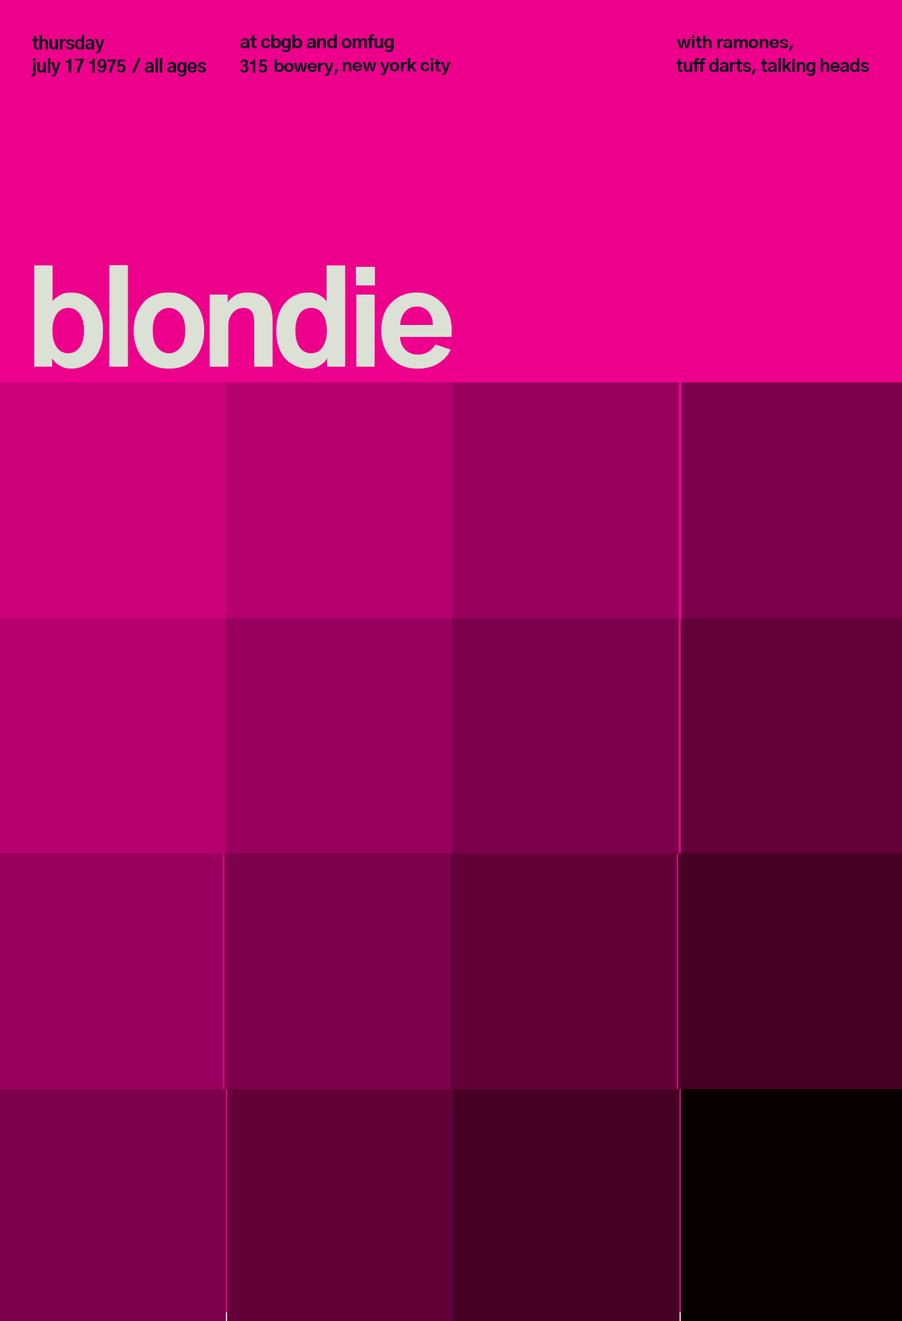
<style>
.page{position:relative;width:902px;height:1321px;background:#ed008c}
.page>*{position:absolute;margin:0}
.t1{font:17.9px "GothicA1-ExtraBold";letter-spacing:-0.035em;color:#0a121d}
.t2{font:16.9px "GothicA1-ExtraBold";letter-spacing:-0.035em;color:#0a121d;scale:1.09 1}
.t3{font:16.7px "GothicA1-ExtraBold";letter-spacing:-0.03em;color:#0a121d;scale:1.09 1}
.t4{font:17.1px "GothicA1-ExtraBold";letter-spacing:-0.035em;color:#0a121d}
.t5{font:17.4px "GothicA1-ExtraBold";letter-spacing:-0.035em;color:#0a121d}
.t6{font:16.8px "GothicA1-ExtraBold";letter-spacing:-0.035em;color:#0a121d}
.t7{font:16.2px "GothicA1-ExtraBold";letter-spacing:-0.035em;color:#0a121d;scale:1.09 1}
.t8{font:17.1px "GothicA1-ExtraBold";letter-spacing:-0.03em;color:#0a121d;scale:1.03 1}
.t9{font:124.6px "GothicA1-ExtraBold";letter-spacing:-0.057em;color:#dbe1d5;scale:1.05 1}
</style>
<div class="page">
<p class="t1" style="left:32px;top:35px;width:73px;height:19px">thursday</p>
<p class="t2" style="left:240px;top:34px;width:154px;height:18px">at cbgb and omfug</p>
<p class="t3" style="left:677px;top:35px;width:117px;height:16px">with ramones,</p>
<p class="t1" style="left:31px;top:58px;width:54px;height:19px">july 17</p>
<p class="t4" style="left:89px;top:59px;width:37px;height:14px">1975</p>
<p class="t5" style="left:131px;top:57px;width:10px;height:16px;rotate:5deg">/</p>
<p class="t1" style="left:145px;top:58px;width:62px;height:19px">all ages</p>
<p class="t6" style="left:240px;top:59px;width:28px;height:14px">315</p>
<p class="t7" style="left:274px;top:59px;width:65px;height:17px">bowery,</p>
<p class="t3" style="left:343px;top:58px;width:108px;height:17px">new york city</p>
<p class="t8" style="left:677px;top:58px;width:193px;height:18px">tuff darts, talking heads</p>
<p class="t9" style="left:34px;top:265px;width:418px;height:104px">blondie</p>
</div>
